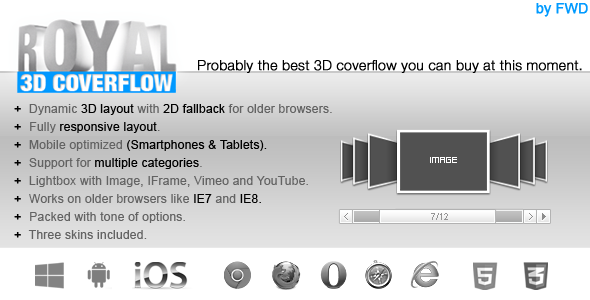
<style>
.page{position:relative;width:590px;height:300px;background:#ffffff}
.page>*{position:absolute;margin:0}
.t1{font:14px "ArialMT";color:#009aff;font-weight:bold}
.t2{font:14px "HelveticaNeueLTCom-Lt";color:#010101;font-weight:bold}
.t3{font:12px/17.9px "ArialMT";letter-spacing:0.02em;color:#636363}
.t4{font:12px/17.9px "ArialMT";letter-spacing:0.02em;color:#000000;font-weight:bold}
.t5{font:12px/17.9px "ArialMT";letter-spacing:0.02em;color:#000000}
.t6{font:12px/17.9px "ArialMT";letter-spacing:0.02em;color:#010101}
.t7{font:8px "FFFIdeaCondensed";color:#ffffff}
.t8{font:9px "ArialMT";color:#959595}
</style>
<div class="page">
<p class="t1" style="left:536px;top:3px;width:52px;height:14px">by FWD</p>
<p class="t2" style="left:198px;top:60px;width:384px;height:13px">Probably the best 3D coverflow you can buy at this moment.</p>
<p class="t3" style="left:14px;top:104px;width:318px;height:135px"><span class="t4">+  </span>Dynamic <span class="t5">3D layout </span>with <span class="t6">2D fallback</span> for older browsers.<br><span class="t4">+  </span>Fully <span class="t6">responsive layout</span>.<br><span class="t4">+  </span>Mobile optimized<span class="t5"> (Smartphones &amp; Tablets).<br></span><span class="t4">+  </span>Support for <span class="t5">multiple categories</span>.<br><span class="t4">+  </span>Lightbox with Image, IFrame, Vimeo and YouTube.<br><span class="t4">+  </span>Works on older browsers like<span class="t5"> IE7 </span>and <span class="t5">IE8. <br></span><span class="t4">+  </span>Packed with tone of options.<br><span class="t4">+ </span> Three skins included.</p>
<p class="t7" style="left:430px;top:157px;width:27px;height:6px">IMAGE</p>
<p class="t8" style="left:431px;top:213px;width:17px;height:7px">7/12</p>
</div>
